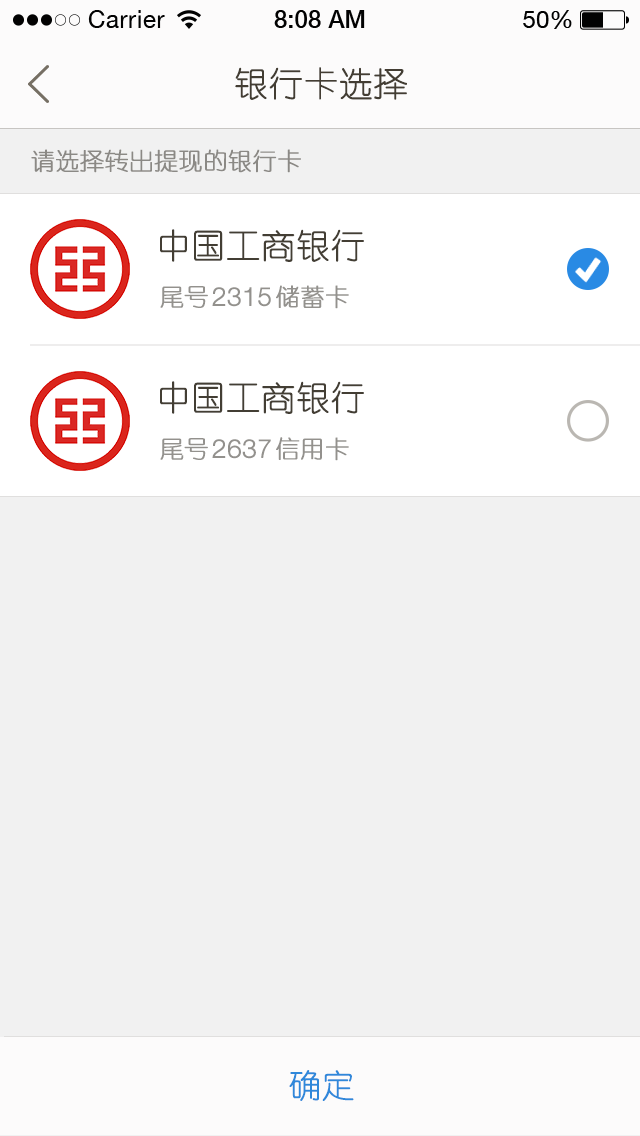
<style>
.page{position:relative;width:640px;height:1136px;background:#f1f1f1}
.page>*{position:absolute;margin:0}
.t1{font:34px "YouYuan";color:#433d33;text-transform:uppercase;font-weight:bold}
.t2{font:24px "YouYuan";color:#8b8985;text-transform:uppercase;font-weight:bold}
.t3{font:34px "YouYuan";color:#433e34;text-transform:uppercase;font-weight:bold}
.t4{font:24px "YouYuan";color:#93918d;text-transform:uppercase;font-weight:bold}
.t5{font:26px "HelveticaNeueLTPro-Lt";color:#93918d;text-transform:uppercase;font-weight:bold}
.t6{font:32px "YouYuan";color:#2f88da;text-transform:uppercase;font-weight:bold}
</style>
<div class="page">
<p class="t1" style="left:235px;top:67px;width:172px;height:33px">银行卡选择</p>
<p class="t2" style="left:31px;top:149px;width:270px;height:24px">请选择转出提现的银行卡</p>
<p class="t3" style="left:160px;top:229px;width:204px;height:33px">中国工商银行</p>
<p class="t4" style="left:160px;top:286px;width:48px;height:22px">尾号</p>
<p class="t5" style="left:212px;top:287px;width:59px;height:20px">2315</p>
<p class="t4" style="left:276px;top:285px;width:73px;height:24px">储蓄卡</p>
<p class="t3" style="left:160px;top:381px;width:204px;height:33px">中国工商银行</p>
<p class="t4" style="left:160px;top:438px;width:48px;height:22px">尾号</p>
<p class="t4" style="left:276px;top:437px;width:73px;height:24px">信用卡</p>
<p class="t5" style="left:212px;top:439px;width:59px;height:20px">2637</p>
<p class="t6" style="left:289px;top:1070px;width:65px;height:31px">确定</p>
</div>
